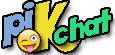
<style>
.page{position:relative;width:115px;height:55px;background:#ffffff}
.page>*{position:absolute;margin:0}
.t1{font:48px "KoolBeans";color:#7ca9da}
.t2{font:66px "KoolBeans"}
.t3{font:36px "KoolBeans";color:#29dd82}
</style>
<div class="page">
<p class="t1" style="left:3px;top:2px;width:31px;height:45px;rotate:-15deg">pi</p>
<p class="t2" style="left:34px;top:1px;width:46px;height:51px;rotate:-15deg">K</p>
<p class="t3" style="left:54px;top:9px;width:57px;height:35px;rotate:-15deg">chat</p>
</div>
